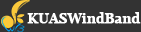
<style>
.page{position:relative;width:141px;height:32px;background:#333333}
.page>*{position:absolute;margin:0}
.t1{font:12.6px "Georgia-Bold";color:#ffffff;font-weight:bold}
</style>
<div class="page">
<p class="t1" style="left:27px;top:12px;width:114px;height:12px">KUASWindBand</p>
</div>
